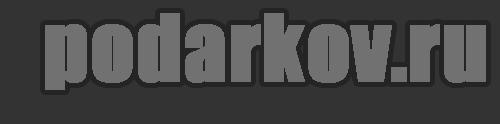
<style>
.page{position:relative;width:500px;height:124px;background:#333333}
.page>*{position:absolute;margin:0}
.t1{font:86px "Impact";color:#717171;font-weight:bold}
</style>
<div class="page">
<p class="t1" style="left:45px;top:13px;width:441px;height:77px">podarkov.ru</p>
</div>
